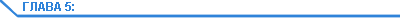
<style>
.page{position:relative;width:400px;height:18px;background:#ffffff}
.page>*{position:absolute;margin:0}
.t1{font:12px "Arial-BoldMT";color:#2f83d9}
.t2{font:12px "ArialMT";color:#2f83d9}
</style>
<div class="page">
<p class="t1" style="left:23px;top:2px;width:51px;height:9px"><span class="t2"> </span>ГЛАВА 5:</p>
</div>
